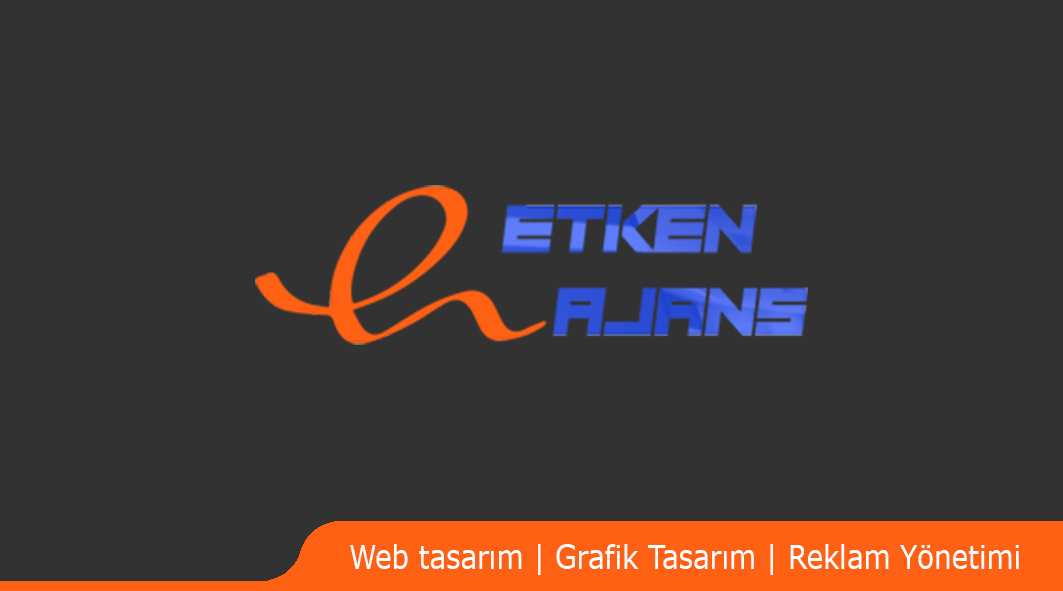
<style>
.page{position:relative;width:1063px;height:591px;background:#323232}
.page>*{position:absolute;margin:0}
.t1{font:33.3px "Verdana";color:#ffffff;scale:0.83 1}
</style>
<div class="page">
<p class="t1" style="left:350px;top:544px;width:669px;height:31px">Web tasarım | Grafik Tasarım | Reklam Yönetimi</p>
</div>
